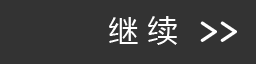
<style>
.page{position:relative;width:256px;height:64px;background:#333333}
.page>*{position:absolute;margin:0}
.t1{font:30px "MicrosoftYaHei";letter-spacing:0.3em;color:#ffffff}
</style>
<div class="page">
<p class="t1" style="left:109px;top:16px;width:68px;height:29px">继续</p>
</div>
